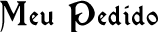
<style>
.page{position:relative;width:161px;height:32px;background:#ffffff}
.page>*{position:absolute;margin:0}
.t1{font:24px "Kelmscott-Regular";letter-spacing:0.05em;color:#000000}
.t2{font:30px "Kelmscott-Regular";letter-spacing:0.05em;color:#000000}
</style>
<div class="page">
<p class="t1" style="left:0px;top:0px;width:158px;height:32px"><span class="t2">M</span>eu <span class="t2">P</span>edido</p>
</div>
